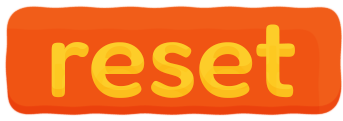
<style>
.page{position:relative;width:343px;height:121px;background:#f05413}
.page>*{position:absolute;margin:0}
.t1{font:110.2px "Fredoka-Medium";letter-spacing:-0.005em;color:#fdc921}
</style>
<div class="page">
<p class="t1" style="left:51px;top:24px;width:244px;height:74px">reset</p>
</div>
